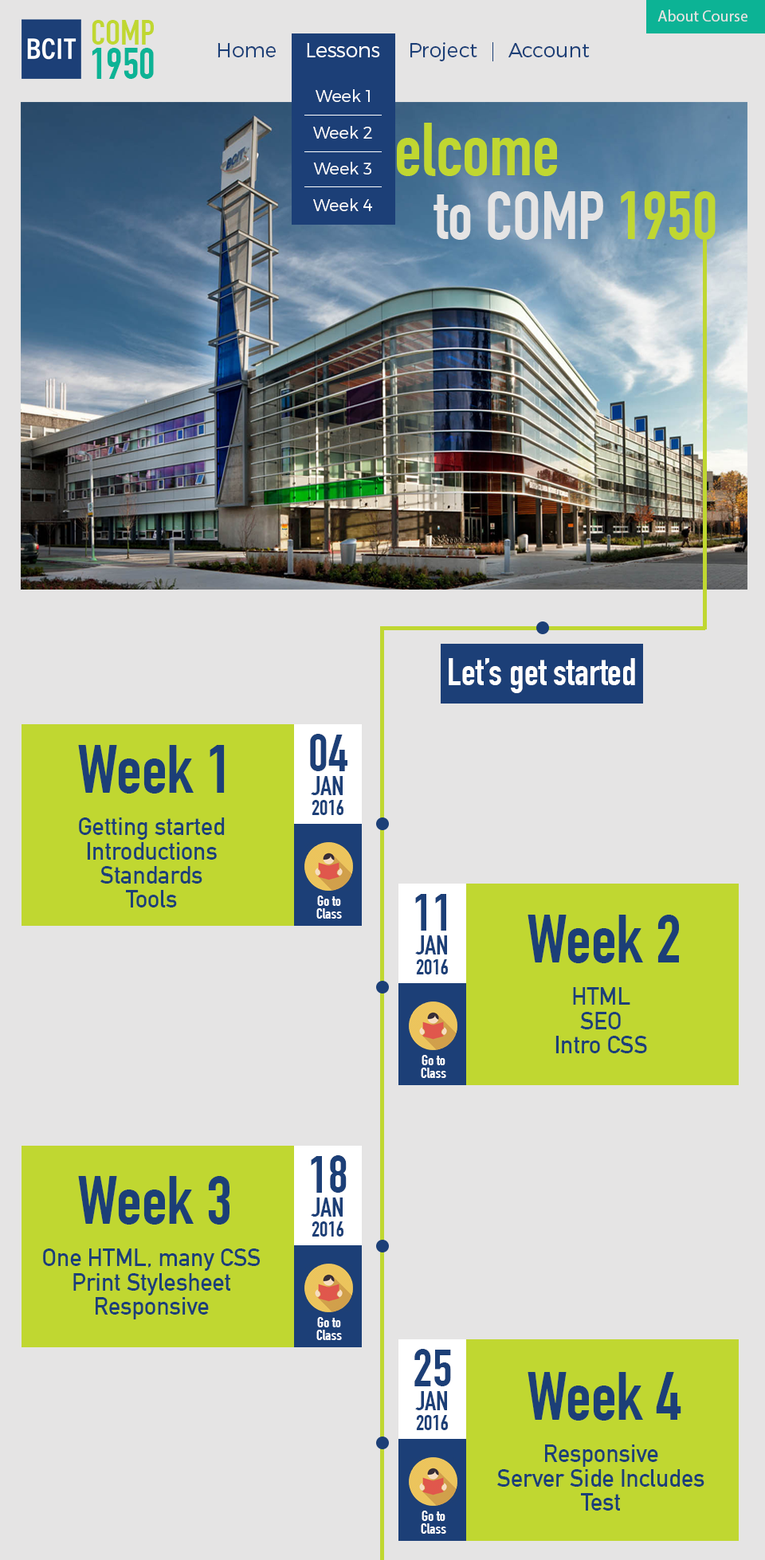
<style>
.page{position:relative;width:765px;height:1560px;background:#e5e4e4}
.page>*{position:absolute;margin:0}
.t1{font:16.1px "MyriadPro-Regular";color:#e5e4e4}
.t2{font:35.4px "DINCondensed-Bold";color:#c0d731}
.t3{font:43.9px "DINCondensed-Bold";color:#0cb395}
.t4{font:20.3px "Montserrat-Light";color:#1c3f77}
.t5{font:20.3px "Montserrat-Light";color:#ffffff}
.t6{font:16.9px "Montserrat-Light";color:#ffffff}
.t7{font:73px "DINCondensed-Bold";color:#c0d731}
.t8{font:66.9px "DINCondensed-Bold";color:#e5e4e4}
.t9{font:66.9px "DINCondensed-Bold";color:#c0d731}
.t10{font:38.2px "DINCondensed-Bold";color:#fffffe}
.t11{font:51.5px "DINCondensed-Bold";color:#1c3f77}
.t12{font:67.3px "DINCondensed-Bold";color:#1c3f77}
.t13{font:26.7px "DINCondensed-Bold";color:#1c3f77;scale:1.04 1}
.t14{font:21.1px "DINCondensed-Bold";color:#1c3f77;scale:1.04 1}
.t15{font:23.9px "DINAlternate-Bold";color:#1c3f77}
.t16{font:14.4px "DINCondensed-Bold";color:#ffffff;scale:1.07 1}
</style>
<div class="page">
<p class="t1" style="left:657px;top:10px;width:90px;height:12px">About Course</p>
<p class="t2" style="left:92px;top:20px;width:62px;height:25px">COMP</p>
<p class="t3" style="left:92px;top:48px;width:62px;height:31px">1950</p>
<p class="t4" style="left:217px;top:43px;width:59px;height:14px">Home</p>
<p class="t5" style="left:307px;top:43px;width:73px;height:14px">Lessons</p>
<p class="t5" style="left:307px;top:43px;width:73px;height:14px">Lessons</p>
<p class="t4" style="left:410px;top:42px;width:67px;height:19px">Project</p>
<p class="t4" style="left:508px;top:43px;width:81px;height:14px">Account</p>
<p class="t6" style="left:315px;top:89px;width:55px;height:13px">Week 1</p>
<p class="t6" style="left:313px;top:126px;width:59px;height:13px">Week 2</p>
<p class="t7" style="left:353px;top:123px;width:204px;height:53px">Welcome</p>
<p class="t6" style="left:313px;top:162px;width:58px;height:12px">Week 3</p>
<p class="t8" style="left:433px;top:191px;width:282px;height:49px">to COMP <span class="t9">1950</span></p>
<p class="t6" style="left:313px;top:198px;width:59px;height:13px">Week 4</p>
<p class="t10" style="left:448px;top:658px;width:187px;height:35px">Let’s get started</p>
<p class="t11" style="left:310px;top:734px;width:37px;height:37px">04</p>
<p class="t12" style="left:78px;top:745px;width:147px;height:48px">Week 1</p>
<p class="t13" style="left:311px;top:776px;width:31px;height:19px">JAN</p>
<p class="t14" style="left:311px;top:800px;width:32px;height:15px">2016</p>
<p class="t15" style="left:79px;top:817px;width:146px;height:22px">Getting started</p>
<p class="t15" style="left:87px;top:842px;width:130px;height:17px">Introductions</p>
<p class="t15" style="left:100px;top:866px;width:102px;height:17px">Standards</p>
<p class="t15" style="left:126px;top:890px;width:51px;height:17px">Tools</p>
<p class="t11" style="left:415px;top:894px;width:31px;height:36px">11</p>
<p class="t16" style="left:317px;top:895px;width:24px;height:11px">Go to</p>
<p class="t16" style="left:316px;top:908px;width:26px;height:10px">Class</p>
<p class="t12" style="left:527px;top:914px;width:152px;height:49px">Week 2</p>
<p class="t13" style="left:415px;top:935px;width:32px;height:19px">JAN</p>
<p class="t14" style="left:416px;top:959px;width:32px;height:15px">2016</p>
<p class="t15" style="left:573px;top:987px;width:57px;height:17px">HTML</p>
<p class="t15" style="left:580px;top:1012px;width:40px;height:17px">SEO</p>
<p class="t15" style="left:555px;top:1035px;width:92px;height:18px">Intro CSS</p>
<p class="t16" style="left:421px;top:1055px;width:24px;height:10px">Go to</p>
<p class="t16" style="left:421px;top:1067px;width:25px;height:11px">Class</p>
<p class="t11" style="left:311px;top:1155px;width:35px;height:37px">18</p>
<p class="t12" style="left:78px;top:1176px;width:151px;height:48px">Week 3</p>
<p class="t13" style="left:311px;top:1197px;width:31px;height:19px">JAN</p>
<p class="t14" style="left:311px;top:1221px;width:32px;height:15px">2016</p>
<p class="t15" style="left:43px;top:1248px;width:217px;height:22px">One HTML, many CSS</p>
<p class="t15" style="left:73px;top:1273px;width:157px;height:22px">Print Stylesheet</p>
<p class="t15" style="left:96px;top:1297px;width:113px;height:22px">Responsive</p>
<p class="t16" style="left:317px;top:1317px;width:24px;height:10px">Go to</p>
<p class="t16" style="left:316px;top:1329px;width:26px;height:11px">Class</p>
<p class="t11" style="left:414px;top:1348px;width:37px;height:38px">25</p>
<p class="t12" style="left:527px;top:1372px;width:154px;height:48px">Week 4</p>
<p class="t13" style="left:415px;top:1391px;width:32px;height:19px">JAN</p>
<p class="t14" style="left:416px;top:1415px;width:32px;height:15px">2016</p>
<p class="t15" style="left:545px;top:1444px;width:113px;height:22px">Responsive</p>
<p class="t15" style="left:497px;top:1469px;width:207px;height:17px">Server Side Includes</p>
<p class="t15" style="left:581px;top:1493px;width:39px;height:17px">Test</p>
<p class="t16" style="left:421px;top:1510px;width:24px;height:10px">Go to</p>
<p class="t16" style="left:421px;top:1523px;width:25px;height:10px">Class</p>
</div>
